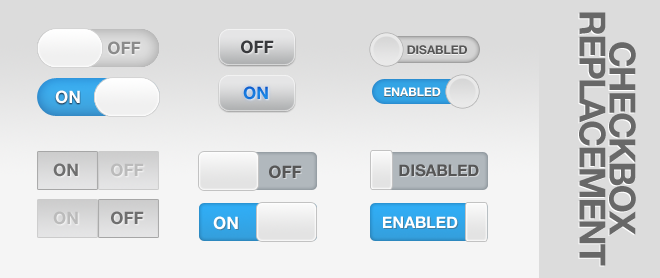
<style>
.page{position:relative;width:660px;height:278px;background:#dcdcdc}
.page>*{position:absolute;margin:0}
.t1{font:36px/30px "HelveticaNeue-Bold";letter-spacing:-0.05em;color:#686868}
.t2{font:17px "HelveticaNeue-Bold";color:#8b8b8b}
.t3{font:17px "HelveticaNeue-Bold";color:#393a3d}
.t4{font:12px "HelveticaNeue-Bold";color:#565656}
.t5{font:17px "HelveticaNeue-Bold";color:#1679de}
.t6{font:12px "HelveticaNeue-Bold";color:#ffffff}
.t7{font:17px "HelveticaNeue-Bold";color:#ffffff}
.t8{font:17px "HelveticaNeue-Bold";color:#6f6f6f}
.t9{font:17px "HelveticaNeue-Bold";color:#bbbbbb}
.t10{font:17px "HelveticaNeue-Bold";color:#565656}
.t11{font:16px "HelveticaNeue-Bold";color:#565656}
.t12{font:16px "HelveticaNeue-Bold";color:#ffffff}
</style>
<div class="page">
<p class="t1" style="left:579px;top:12px;width:57px;height:254px;text-align:center;rotate:90deg">CHECKBOX<br>REPLACEMENT</p>
<p class="t2" style="left:108px;top:41px;width:33px;height:14px">OFF</p>
<p class="t3" style="left:241px;top:40px;width:33px;height:14px">OFF</p>
<p class="t4" style="left:407px;top:45px;width:60px;height:10px">DISABLED</p>
<p class="t5" style="left:243px;top:86px;width:25px;height:14px">ON</p>
<p class="t6" style="left:384px;top:87px;width:57px;height:9px">ENABLED</p>
<p class="t7" style="left:55px;top:90px;width:25px;height:14px">ON</p>
<p class="t8" style="left:53px;top:163px;width:25px;height:14px">ON</p>
<p class="t9" style="left:111px;top:163px;width:33px;height:14px">OFF</p>
<p class="t10" style="left:269px;top:165px;width:33px;height:14px">OFF</p>
<p class="t11" style="left:399px;top:164px;width:80px;height:13px">DISABLED</p>
<p class="t9" style="left:53px;top:211px;width:25px;height:14px">ON</p>
<p class="t8" style="left:111px;top:211px;width:33px;height:14px">OFF</p>
<p class="t7" style="left:213px;top:216px;width:25px;height:14px">ON</p>
<p class="t12" style="left:383px;top:216px;width:75px;height:12px">ENABLED</p>
</div>
